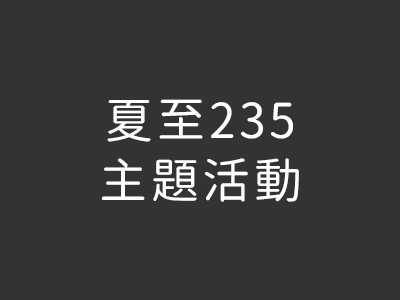
<style>
.page{position:relative;width:400px;height:300px;background:#333333}
.page>*{position:absolute;margin:0}
.t1{font:48px/60px "GenJyuuGothic-P-Regular";letter-spacing:0.075em;color:#ffffff}
</style>
<div class="page">
<p class="t1" style="left:101px;top:99px;width:198px;height:103px;text-align:center">夏至235<br>主題活動</p>
</div>
